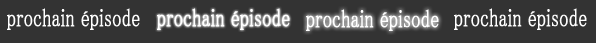
<style>
.page{position:relative;width:596px;height:43px;background:#333333}
.page>*{position:absolute;margin:0}
.t1{font:24.7px "MS-PMincho";color:#ffffff;font-weight:bold;scale:0.74 1}
</style>
<div class="page">
<p class="t1" style="left:7px;top:8px;width:133px;height:22px">prochain épisode</p>
<p class="t1" style="left:157px;top:8px;width:133px;height:22px">prochain épisode</p>
<p class="t1" style="left:306px;top:9px;width:133px;height:22px">prochain épisode</p>
<p class="t1" style="left:454px;top:8px;width:133px;height:22px">prochain épisode</p>
</div>
